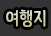
<style>
.page{position:relative;width:51px;height:36px;background:#333333}
.page>*{position:absolute;margin:0}
.t1{font:18px "NanumBarunpen-Bold"}
</style>
<div class="page">
<p class="t1" style="left:6px;top:9px;width:40px;height:18px">여행지</p>
</div>
